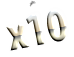
<style>
.page{position:relative;width:74px;height:57px;background:#ffffff}
.page>*{position:absolute;margin:0}
.t1{font:48.3px "MyriadPro-BoldCond"}
</style>
<div class="page">
<p class="t1" style="left:6px;top:9px;width:61px;height:42px;rotate:-11deg">x10</p>
</div>
